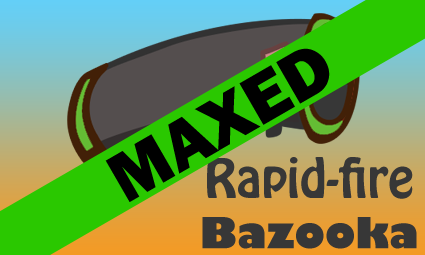
<style>
.page{position:relative;width:425px;height:255px}
.page>*{position:absolute;margin:0}
.t1{font:72px "FranklinGothic-Heavy";color:#000000}
.t2{font:48px "HoboStd";color:#373737}
.t3{font:42px "GillSans-UltraBold";color:#373737}
</style>
<div class="page">
<p class="t1" style="left:105px;top:48px;width:225px;height:154px;rotate:-30deg">MAXED</p>
<p class="t2" style="left:202px;top:157px;width:215px;height:92px;text-align:center">Rapid-fire<br><span class="t3">Bazooka</span></p>
</div>
